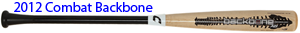
<style>
.page{position:relative;width:300px;height:33px;background:#ffffff}
.page>*{position:absolute;margin:0}
.t1{font:14px "MyriadPro-Regular";color:#0000ff}
</style>
<div class="page">
<p class="t1" style="left:14px;top:2px;width:139px;height:10px">2012 Combat Backbone</p>
</div>
